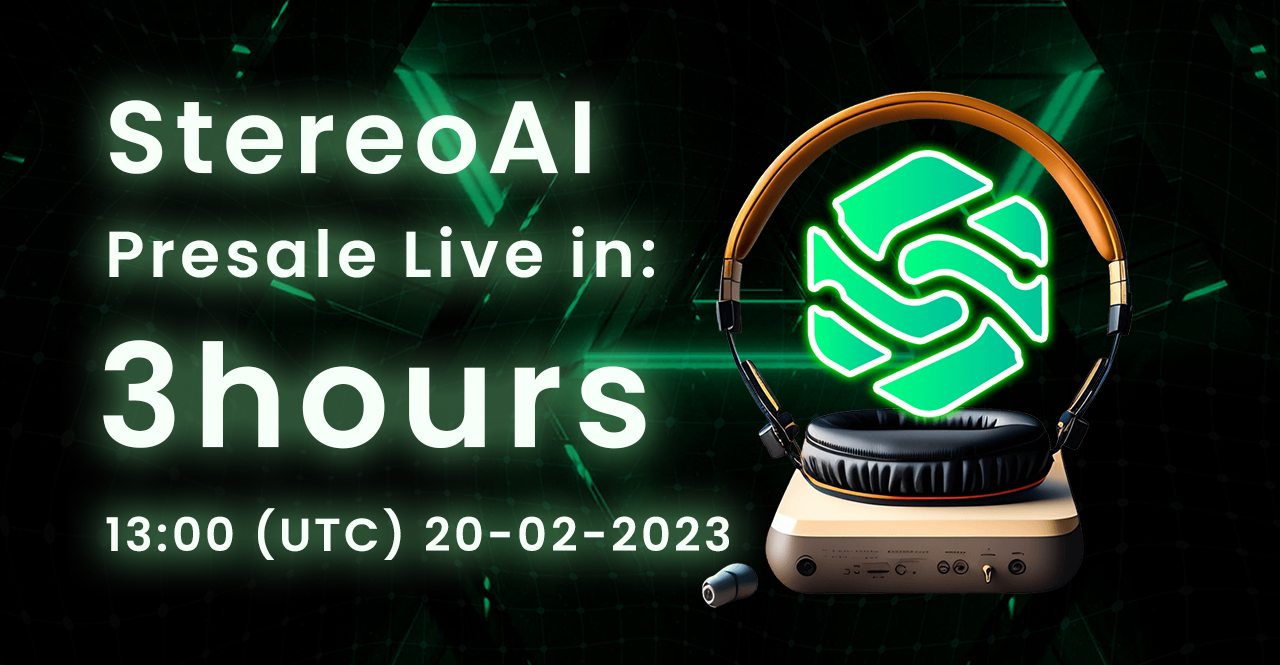
<style>
.page{position:relative;width:1280px;height:665px}
.page>*{position:absolute;margin:0}
.t1{font:102.6px "Poppins-SemiBold";letter-spacing:0.075em;color:#f7fff9}
.t2{font:64.9px "Poppins-SemiBold";letter-spacing:0.075em;color:#f7fff9}
.t3{font:143px "Poppins-SemiBold";letter-spacing:0.075em;color:#f7fff9}
.t4{font:46.2px "Poppins-SemiBold";letter-spacing:0.075em;color:#f7fff9}
</style>
<div class="page">
<p class="t1" style="left:110px;top:100px;width:480px;height:74px">StereoAI</p>
<p class="t2" style="left:109px;top:226px;width:545px;height:52px">Presale Live in:</p>
<p class="t3" style="left:103px;top:340px;width:543px;height:109px">3hourss</p>
<p class="t4" style="left:106px;top:508px;width:623px;height:52px">13:00 (UTC) 20-02-2023</p>
</div>
